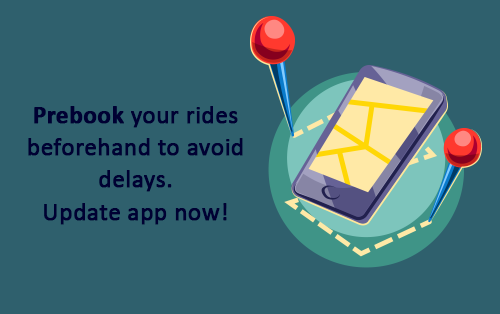
<style>
.page{position:relative;width:500px;height:314px;background:#2f606d}
.page>*{position:absolute;margin:0}
.t1{font:25px/32.4px "Calibri";color:#000033;font-weight:bold}
.t2{font:25px/32.4px "Calibri-Bold";color:#000033;font-weight:bold}
</style>
<div class="page">
<p class="t1" style="left:28px;top:106px;width:215px;height:119px;text-align:center"><span class="t2">Prebook </span>your rides beforehand to avoid delays.<br>Update app now!</p>
</div>
